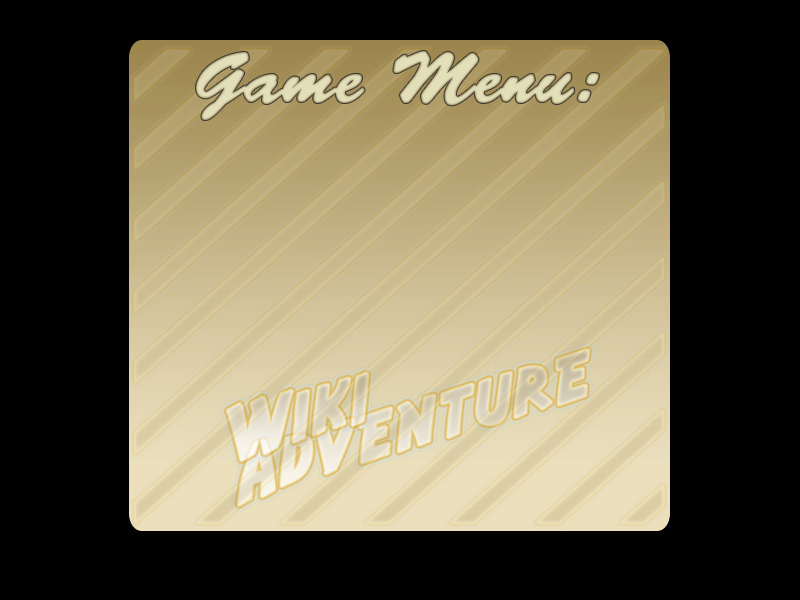
<style>
.page{position:relative;width:800px;height:600px;background:#000000}
.page>*{position:absolute;margin:0}
.t1{font:72px "BrushScriptStd";color:#e1ddb7;font-weight:bold}
.t2{font:72px "AdventureNormal";font-weight:bold}
</style>
<div class="page">
<p class="t1" style="left:196px;top:51px;width:403px;height:69px">Game Menu:</p>
<p class="t2" style="left:238px;top:349px;width:351px;height:157px;rotate:-16deg">Adventure</p>
<p class="t2" style="left:227px;top:373px;width:141px;height:88px;rotate:-16deg">Wiki</p>
</div>
